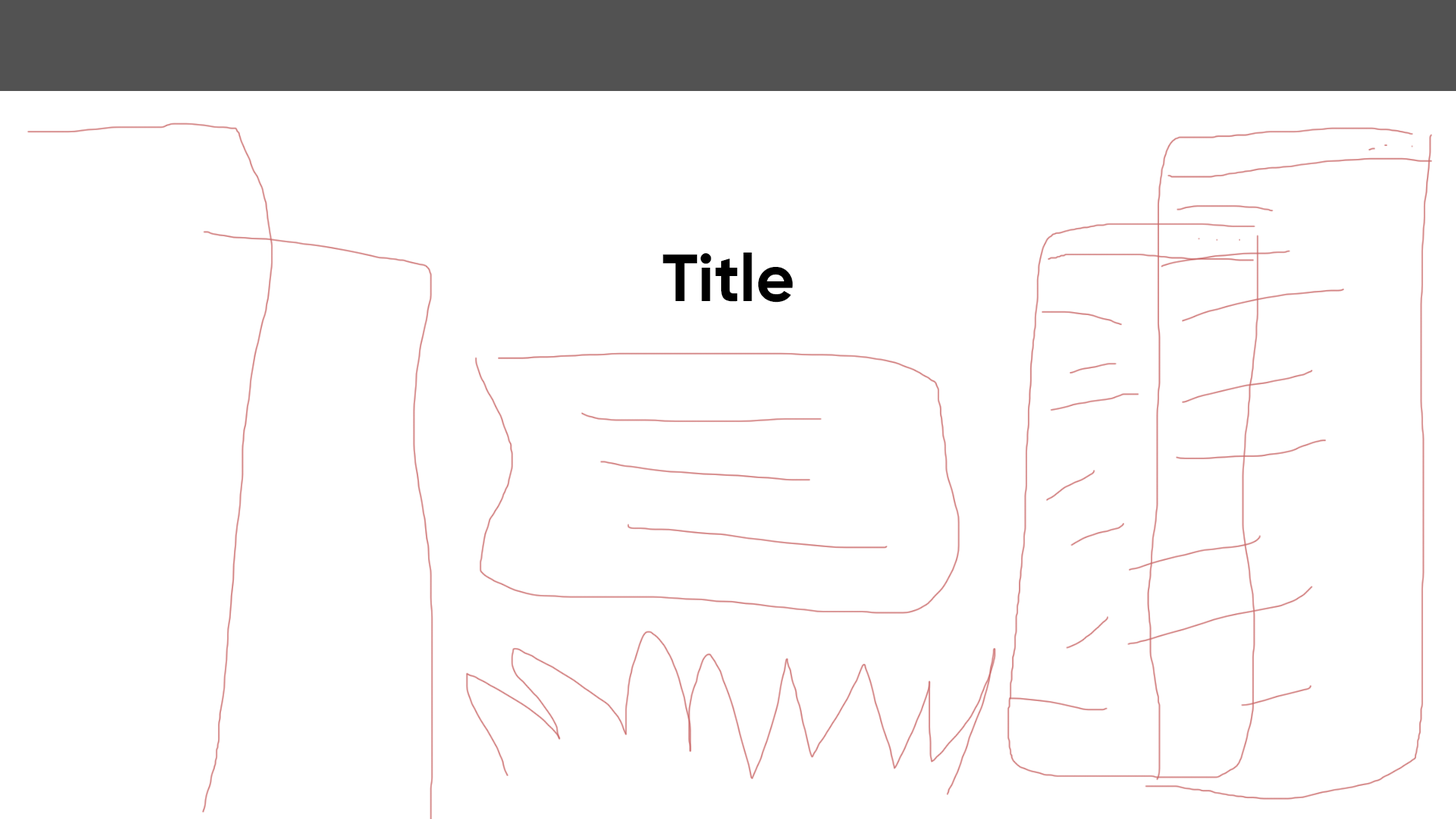
<style>
.page{position:relative;width:1456px;height:819px;background:#ffffff}
.page>*{position:absolute;margin:0}
.t1{font:66.5px "Gilroy-Bold";color:#000000}
</style>
<div class="page">
<p class="t1" style="left:663px;top:253px;width:130px;height:50px">Title</p>
</div>
